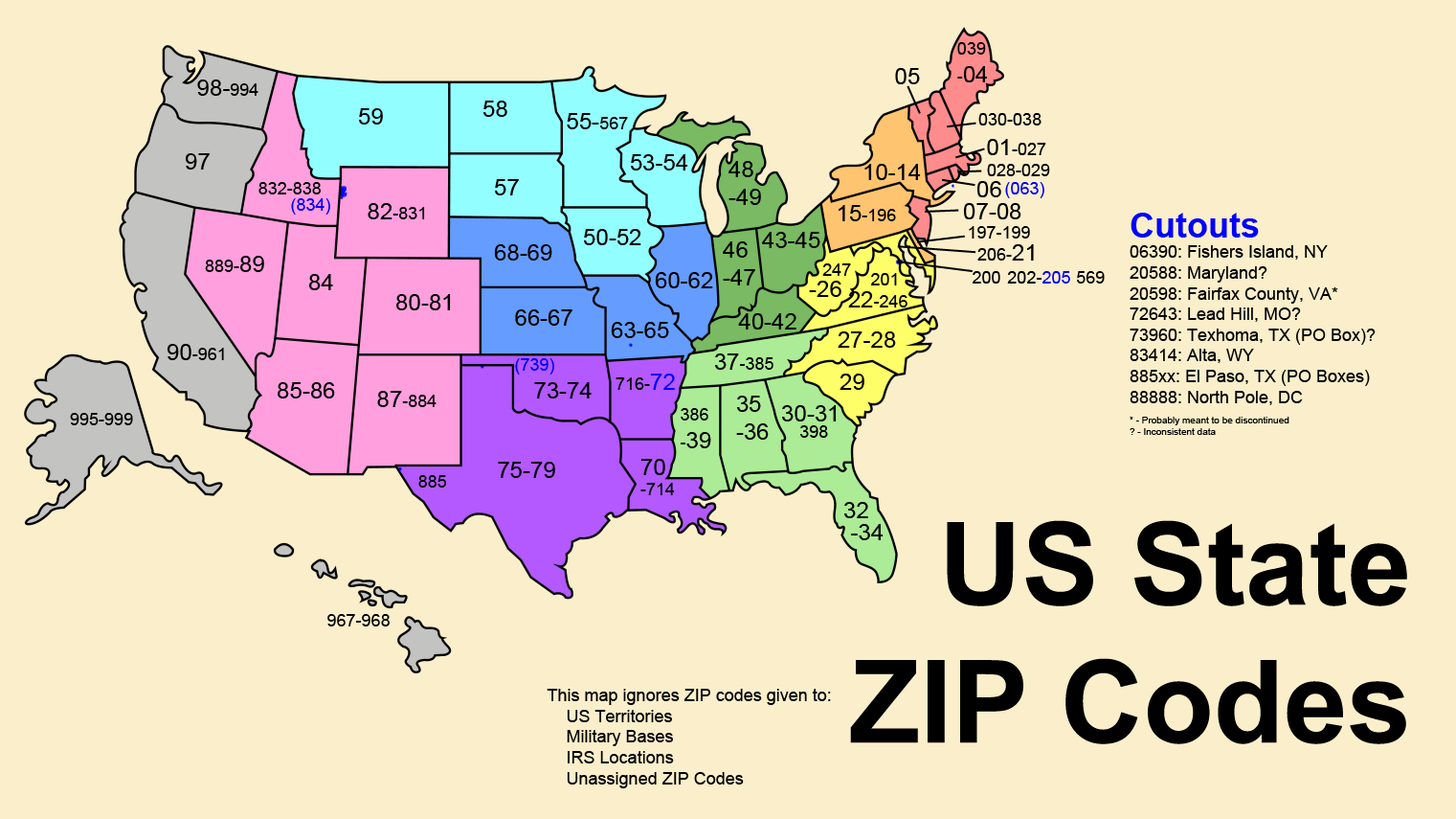
<style>
.page{position:relative;width:1456px;height:819px;background:#faefca}
.page>*{position:absolute;margin:0}
.t1{font:17.2px "ArialMT";color:#000000}
.t2{font:23px "ArialMT";color:#000000}
.t3{font:17.2px "ArialMT";color:#0000ff}
.t4{font:34.5px "Arial-BoldMT";color:#0000ff}
.t5{font:9.6px "ArialMT";color:#000000}
.t6{font:23px "ArialMT";color:#0000ff}
.t7{font:114.9px "Arial-BoldMT";color:#000000}
</style>
<div class="page">
<p class="t1" style="left:958px;top:42px;width:30px;height:40px">039<br>-<span class="t2">04</span></p>
<p class="t2" style="left:895px;top:68px;width:25px;height:16px">05</p>
<p class="t2" style="left:197px;top:79px;width:62px;height:17px">98-<span class="t1">994</span></p>
<p class="t2" style="left:484px;top:101px;width:24px;height:16px">58</p>
<p class="t2" style="left:359px;top:108px;width:24px;height:16px">59</p>
<p class="t2" style="left:567px;top:113px;width:61px;height:16px">55-<span class="t1">567</span></p>
<p class="t1" style="left:979px;top:113px;width:63px;height:12px">030-038</p>
<p class="t1" style="left:987px;top:139px;width:60px;height:16px"><span class="t2">01</span>-027</p>
<p class="t2" style="left:185px;top:153px;width:25px;height:16px">97</p>
<p class="t2" style="left:631px;top:154px;width:57px;height:16px">53-54</p>
<p class="t2" style="left:729px;top:161px;width:32px;height:44px">48<br>-49</p>
<p class="t2" style="left:865px;top:164px;width:56px;height:16px">10-14</p>
<p class="t1" style="left:987px;top:164px;width:63px;height:12px">028-029</p>
<p class="t1" style="left:259px;top:182px;width:62px;height:12px">832-838</p>
<p class="t2" style="left:495px;top:179px;width:24px;height:16px">57</p>
<p class="t2" style="left:977px;top:181px;width:25px;height:16px">06</p>
<p class="t3" style="left:1005px;top:182px;width:40px;height:16px">(063)</p>
<p class="t3" style="left:291px;top:198px;width:39px;height:16px">(834)</p>
<p class="t1" style="left:368px;top:203px;width:57px;height:16px"><span class="t2">82</span>-831</p>
<p class="t1" style="left:839px;top:205px;width:57px;height:16px"><span class="t2">15</span>-196</p>
<p class="t2" style="left:963px;top:203px;width:59px;height:16px">07-08</p>
<p class="t1" style="left:1130px;top:213px;width:246px;height:222px"><span class="t4">Cutouts <br></span>06390: Fishers Island, NY<br>20588: Maryland?<br>20598: Fairfax County, VA*<br>72643: Lead Hill, MO?<br>73960: Texhoma, TX (PO Box)?<br>83414: Alta, WY<br>885xx: El Paso, TX (PO Boxes)<br>88888: North Pole, DC<br><br><span class="t5">* - Probably meant to be discontinued<br>? - Inconsistent data</span></p>
<p class="t2" style="left:584px;top:229px;width:58px;height:16px">50-52</p>
<p class="t2" style="left:762px;top:232px;width:59px;height:16px">43-45</p>
<p class="t1" style="left:969px;top:226px;width:61px;height:12px">197-199</p>
<p class="t2" style="left:494px;top:244px;width:59px;height:16px">68-69</p>
<p class="t2" style="left:723px;top:241px;width:33px;height:44px">46<br>-47</p>
<p class="t1" style="left:978px;top:244px;width:56px;height:16px">206-<span class="t2">21</span></p>
<p class="t1" style="left:205px;top:256px;width:59px;height:16px">889-<span class="t2">89</span></p>
<p class="t1" style="left:823px;top:263px;width:28px;height:13px">247</p>
<p class="t2" style="left:309px;top:274px;width:24px;height:16px">84</p>
<p class="t2" style="left:655px;top:272px;width:58px;height:16px">60-62</p>
<p class="t2" style="left:809px;top:281px;width:33px;height:16px">-26</p>
<p class="t1" style="left:871px;top:273px;width:26px;height:12px">201</p>
<p class="t1" style="left:973px;top:271px;width:28px;height:12px">200</p>
<p class="t1" style="left:1007px;top:271px;width:64px;height:12px">202-<span class="t3">205</span></p>
<p class="t1" style="left:1077px;top:271px;width:28px;height:12px">569</p>
<p class="t2" style="left:396px;top:294px;width:55px;height:16px">80-81</p>
<p class="t1" style="left:848px;top:291px;width:60px;height:16px"><span class="t2">22</span>-246</p>
<p class="t2" style="left:515px;top:309px;width:58px;height:17px">66-67</p>
<p class="t2" style="left:738px;top:313px;width:59px;height:16px">40-42</p>
<p class="t2" style="left:611px;top:322px;width:58px;height:16px">63-65</p>
<p class="t2" style="left:838px;top:331px;width:58px;height:17px">27-28</p>
<p class="t1" style="left:167px;top:344px;width:57px;height:16px"><span class="t2">90</span>-961</p>
<p class="t1" style="left:715px;top:353px;width:59px;height:17px"><span class="t2">37</span>-385</p>
<p class="t3" style="left:515px;top:358px;width:39px;height:16px">(739)</p>
<p class="t1" style="left:616px;top:373px;width:59px;height:17px">716-<span class="t6">72</span></p>
<p class="t2" style="left:840px;top:373px;width:25px;height:17px">29</p>
<p class="t2" style="left:278px;top:382px;width:57px;height:16px">85-86</p>
<p class="t2" style="left:534px;top:382px;width:58px;height:16px">73-74</p>
<p class="t1" style="left:377px;top:391px;width:60px;height:16px"><span class="t2">87</span>-884</p>
<p class="t2" style="left:736px;top:395px;width:33px;height:45px">35<br>-36</p>
<p class="t1" style="left:70px;top:413px;width:63px;height:12px">995-999</p>
<p class="t1" style="left:681px;top:408px;width:30px;height:40px">386<br>-<span class="t2">39</span></p>
<p class="t2" style="left:782px;top:405px;width:55px;height:16px">30-31</p>
<p class="t1" style="left:801px;top:425px;width:27px;height:13px">398</p>
<p class="t2" style="left:498px;top:462px;width:57px;height:16px">75-79</p>
<p class="t1" style="left:641px;top:459px;width:34px;height:36px"><span class="t2">70<br></span>-714</p>
<p class="t1" style="left:418px;top:475px;width:29px;height:12px">885</p>
<p class="t2" style="left:845px;top:502px;width:24px;height:16px">32</p>
<p class="t7" style="left:850px;top:520px;width:558px;height:224px;text-align:right">US State<br>ZIP Codes</p>
<p class="t2" style="left:851px;top:524px;width:33px;height:16px">-34</p>
<p class="t1" style="left:327px;top:614px;width:63px;height:12px">967-968</p>
<p class="t1" style="left:547px;top:688px;width:284px;height:100px">This map ignores ZIP codes given to:<br>    US Territories<br>    Military Bases<br>    IRS Locations<br>    Unassigned ZIP Codes</p>
</div>
